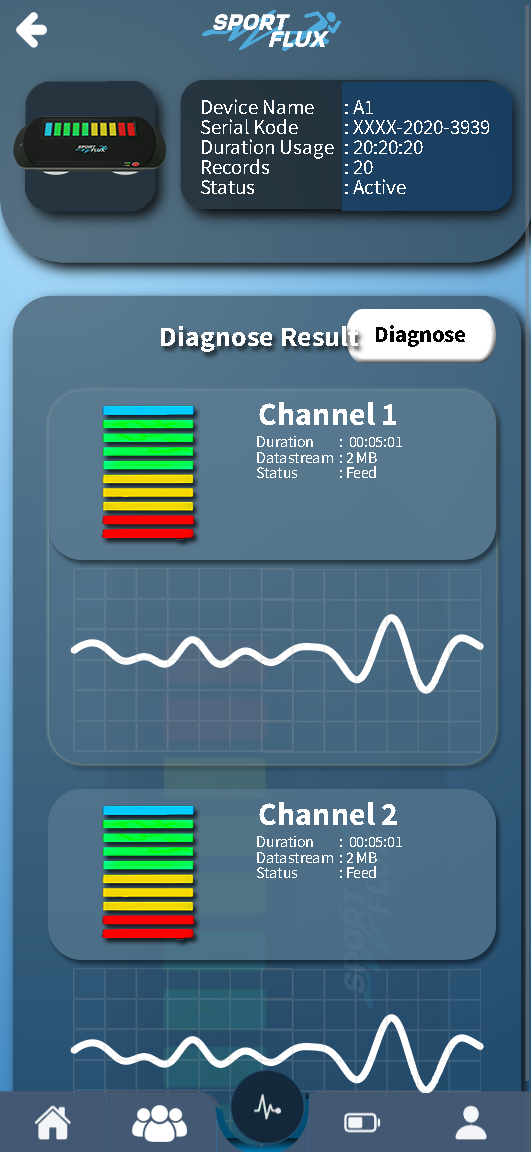
<style>
.page{position:relative;width:531px;height:1152px}
.page>*{position:absolute;margin:0}
.t1{font:21px/20px "SourceSansPro-Regular";color:#ffffff}
.t2{font:28px "SourceSansPro-Bold";color:#ffffff}
.t3{font:23px "SourceSansPro-Bold";color:#000000}
.t4{font:32.4px "SourceSansPro-Bold";color:#ffffff}
.t5{font:16.2px/15.4px "SourceSansPro-Regular";color:#ffffff}
</style>
<div class="page">
<p class="t1" style="left:201px;top:99px;width:288px;height:95px;text-align:right">Device Name : A1<br>Serial Kode  : XXXX-2020-3939<br>Duration Usage : 20:20:20<br>Records   : 20<br>Status   : Active</p>
<p class="t2" style="left:161px;top:326px;width:197px;height:26px">Diagnose Result</p>
<p class="t3" style="left:376px;top:325px;width:89px;height:22px">Diagnose</p>
<p class="t4" style="left:259px;top:402px;width:137px;height:23px">Channel 1</p>
<p class="t5" style="left:257px;top:436px;width:145px;height:42px;text-align:right">Duration  :  00:05:01<br>Datastream  : 2 MB<br>Status  : Feed</p>
<p class="t4" style="left:259px;top:802px;width:138px;height:23px">Channel 2</p>
<p class="t5" style="left:257px;top:836px;width:145px;height:42px;text-align:right">Duration  :  00:05:01<br>Datastream  : 2 MB<br>Status  : Feed</p>
</div>
